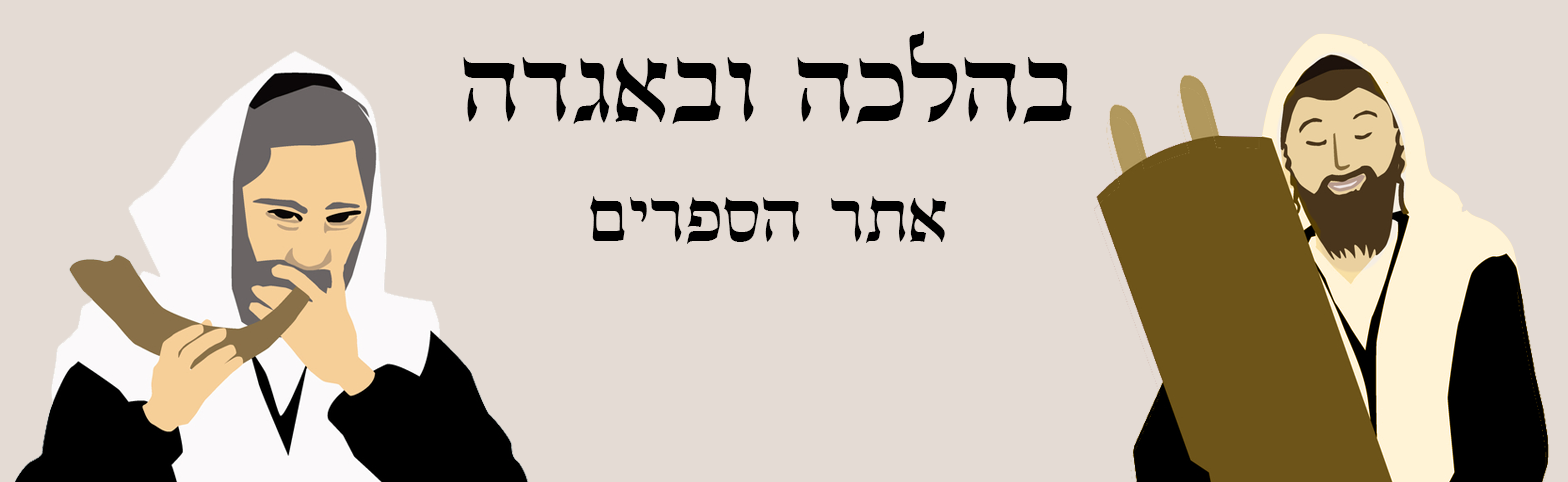
<style>
.page{position:relative;width:1568px;height:482px;background:#e4dbd4}
.page>*{position:absolute;margin:0}
.t1{font:100px/120px "GuttmanMantova";color:#000000}
.t2{font:70px/120px "GuttmanMantova";color:#000000}
</style>
<div class="page">
<p class="t1" style="left:463px;top:31px;width:609px;height:213px;text-align:center">בהלכה ובאגדה <br><span class="t2">אתר הספרים</span></p>
</div>
